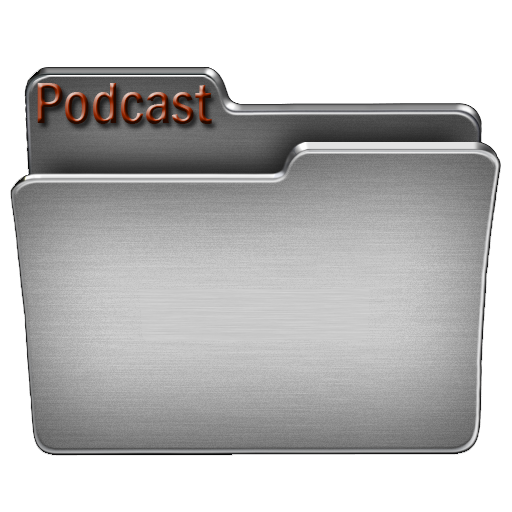
<style>
.page{position:relative;width:512px;height:512px;background:#ffffff}
.page>*{position:absolute;margin:0}
.t1{font:60px "FranklinGothic-MediumCond"}
</style>
<div class="page">
<p class="t1" style="left:37px;top:83px;width:175px;height:41px">Podcast</p>
</div>
